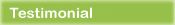
<style>
.page{position:relative;width:175px;height:25px;background:#96c04a}
.page>*{position:absolute;margin:0}
.t1{font:14.2px "ArialRoundedMTBold";color:#fdfcfc;scale:1.07 1}
</style>
<div class="page">
<p class="t1" style="left:9px;top:7px;width:83px;height:11px">Testimonial</p>
</div>
